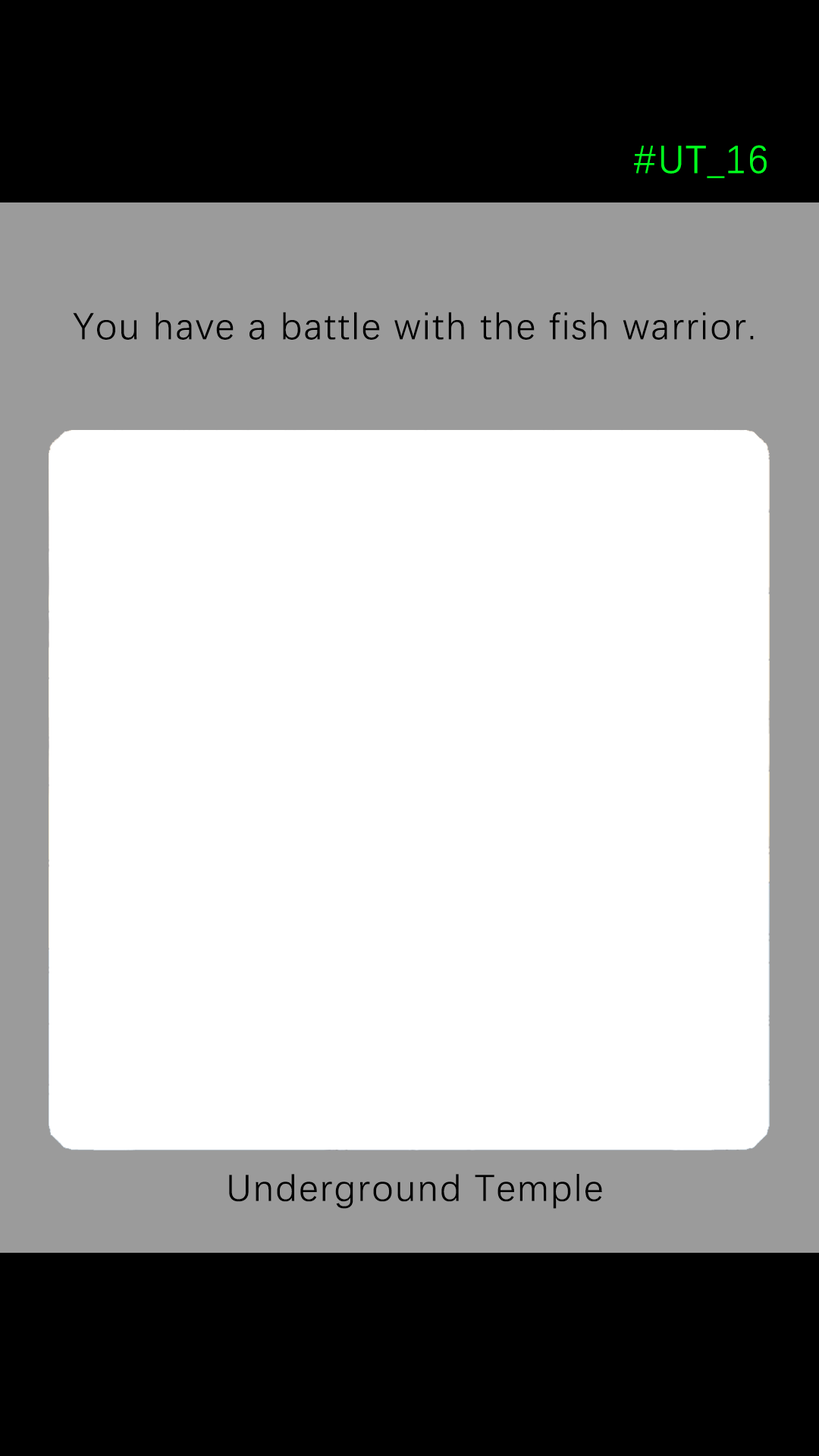
<style>
.page{position:relative;width:819px;height:1456px;background:#ffffff}
.page>*{position:absolute;margin:0}
.t1{font:39.2px "DengXian-Regular";letter-spacing:0.04em;color:#00ff1e}
.t2{font:37.9px "DengXian-Regular";letter-spacing:0.04em;color:#000000}
</style>
<div class="page">
<p class="t1" style="left:634px;top:145px;width:133px;height:33px">#UT_16</p>
<p class="t2" style="left:73px;top:312px;width:681px;height:28px">You have a battle with the fish warrior.</p>
<p class="t2" style="left:229px;top:1174px;width:373px;height:35px">Underground Temple</p>
</div>
